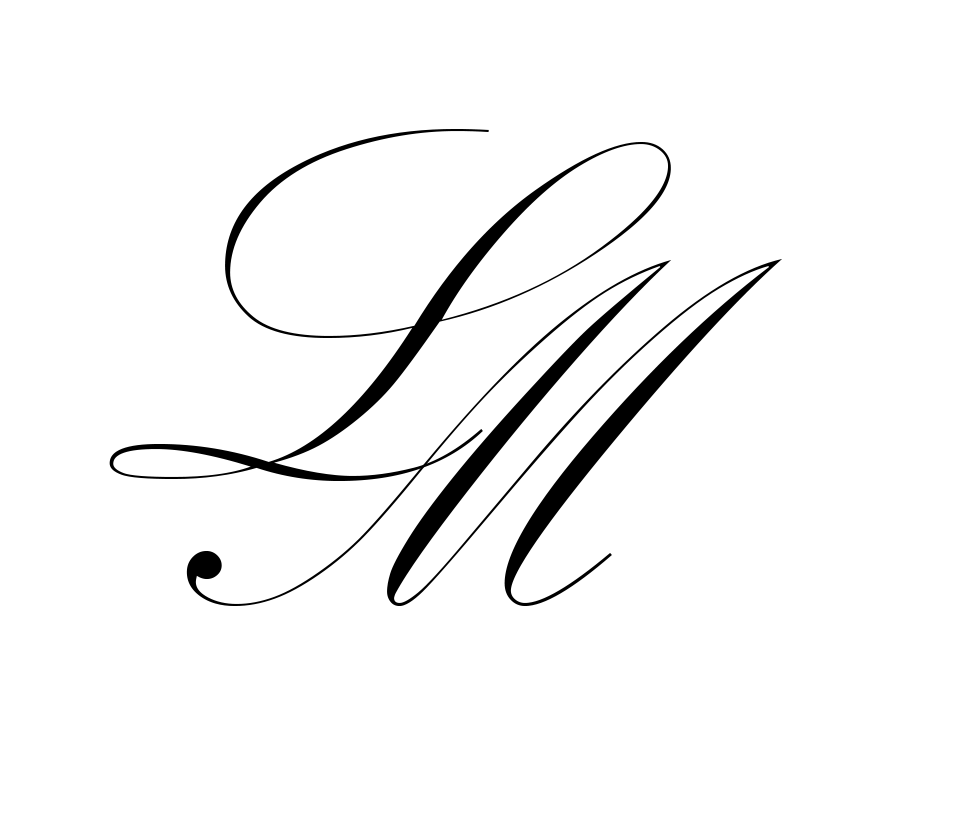
<style>
.page{position:relative;width:953px;height:816px;background:#ffffff}
.page>*{position:absolute;margin:0}
.t1{font:508.3px "KunstlerScript";color:#000000}
</style>
<div class="page">
<p class="t1" style="left:109px;top:129px;width:562px;height:352px">L</p>
<p class="t1" style="left:186px;top:259px;width:596px;height:347px">M</p>
</div>
